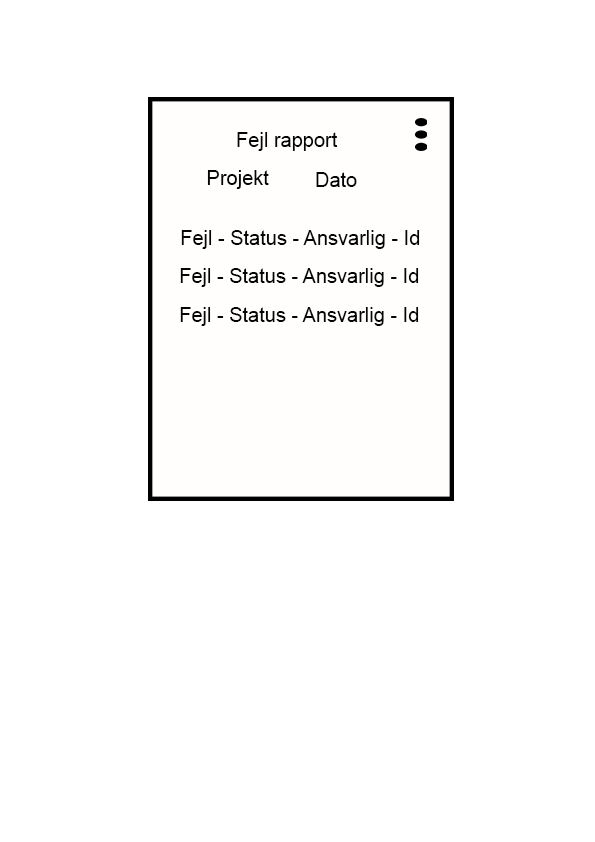
<style>
.page{position:relative;width:595px;height:842px;background:#ffffff}
.page>*{position:absolute;margin:0}
.t1{font:20px "ArialMT";color:#040404}
</style>
<div class="page">
<p class="t1" style="left:237px;top:132px;width:101px;height:19px">Fejl rapport</p>
<p class="t1" style="left:207px;top:170px;width:62px;height:19px">Projekt</p>
<p class="t1" style="left:316px;top:172px;width:41px;height:15px">Dato</p>
<p class="t1" style="left:181px;top:230px;width:239px;height:19px">Fejl - Status - Ansvarlig - Id</p>
<p class="t1" style="left:180px;top:268px;width:239px;height:19px">Fejl - Status - Ansvarlig - Id</p>
<p class="t1" style="left:180px;top:307px;width:239px;height:19px">Fejl - Status - Ansvarlig - Id</p>
</div>
